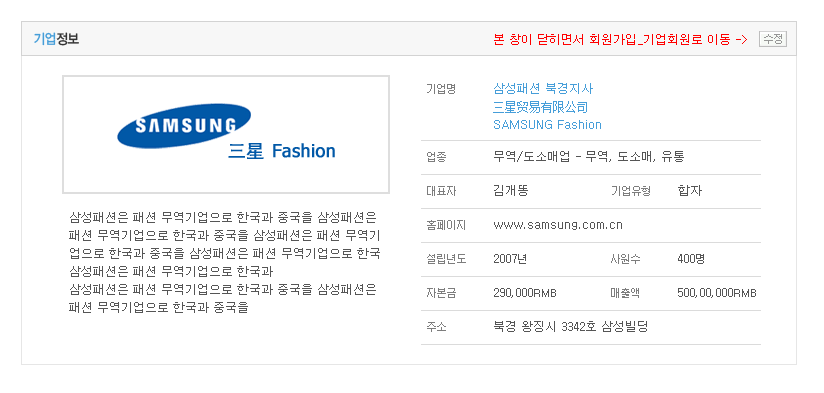
<style>
.page{position:relative;width:824px;height:393px;background:#ffffff}
.page>*{position:absolute;margin:0}
.t1{font:14px "YDIYGO130-KSCpc-EUC-H";letter-spacing:-0.1em;color:#469ed9;scale:0.9 1}
.t2{font:14px "YDIYGO130-KSCpc-EUC-H";letter-spacing:-0.1em;color:#333333;scale:0.9 1}
.t3{font:12px "Dotum";color:#ff0000}
.t4{font:11px "Dotum";letter-spacing:-0.1em;color:#7d7d7d}
.t5{font:12px/18px "Dotum";color:#469ed9}
.t6{font:12px/18px "SimSun";color:#469ed9}
.t7{font:12px "Dotum";color:#555555}
.t8{font:12px/18px "Dotum";color:#555555}
.t9{font:11px "Dotum";color:#555555}
</style>
<div class="page">
<p class="t1" style="left:34px;top:32px;width:45px;height:14px">기업<span class="t2">정보</span></p>
<p class="t3" style="left:494px;top:34px;width:253px;height:11px">본 창이 닫히면서 회원가입_기업회원로 이동 -&gt;</p>
<p class="t4" style="left:427px;top:84px;width:28px;height:10px">기업명</p>
<p class="t5" style="left:493px;top:83px;width:108px;height:46px">삼성패션 북경지사<br><span class="t6">三星贸易有限公司<br></span>SAMSUNG Fashion</p>
<p class="t4" style="left:427px;top:152px;width:19px;height:10px">업종</p>
<p class="t7" style="left:494px;top:151px;width:190px;height:11px">무역/도소매업 - 무역, 도소매, 유통</p>
<p class="t7" style="left:494px;top:185px;width:34px;height:11px">김개똥</p>
<p class="t7" style="left:678px;top:185px;width:24px;height:11px">합자</p>
<p class="t4" style="left:427px;top:186px;width:29px;height:10px">대표자</p>
<p class="t4" style="left:612px;top:186px;width:38px;height:10px">기업유형</p>
<p class="t8" style="left:69px;top:212px;width:311px;height:101px">삼성패션은 패션 무역기업으로 한국과 중국을 삼성패션은 <br>패션 무역기업으로 한국과 중국을 삼성패션은 패션 무역기<br>업으로 한국과 중국을 삼성패션은 패션 무역기업으로 한국<br>삼성패션은 패션 무역기업으로 한국과  <br>삼성패션은 패션 무역기업으로 한국과 중국을 삼성패션은 <br>패션 무역기업으로 한국과 중국을</p>
<p class="t4" style="left:427px;top:220px;width:38px;height:10px">홈페이지</p>
<p class="t7" style="left:494px;top:222px;width:128px;height:8px">www.samsung.com.cn</p>
<p class="t4" style="left:427px;top:254px;width:39px;height:10px">설립년도</p>
<p class="t7" style="left:494px;top:254px;width:32px;height:10px">2007<span class="t9">년</span></p>
<p class="t4" style="left:611px;top:254px;width:29px;height:10px">사원수</p>
<p class="t7" style="left:678px;top:254px;width:26px;height:10px">400<span class="t9">명</span></p>
<p class="t4" style="left:427px;top:288px;width:29px;height:10px">자본금</p>
<p class="t7" style="left:494px;top:288px;width:62px;height:10px">290,000<span class="t9">RMB</span></p>
<p class="t4" style="left:611px;top:288px;width:28px;height:10px">매출액</p>
<p class="t7" style="left:678px;top:288px;width:78px;height:10px">500,00,000<span class="t9">RMB</span></p>
<p class="t4" style="left:427px;top:322px;width:19px;height:10px">주소</p>
<p class="t7" style="left:494px;top:321px;width:153px;height:11px">북경 왕징시 3342호 삼성빌딩</p>
</div>
